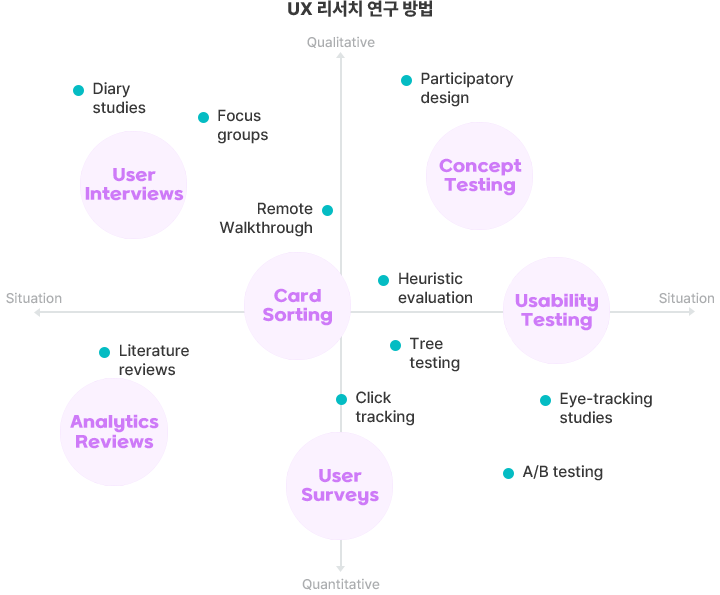
<style>
.page{position:relative;width:720px;height:595px;background:#ffffff}
.page>*{position:absolute;margin:0}
.t1{font:18px "Pretendard-ExtraBold";color:#393939;text-transform:uppercase}
.t2{font:14px "Pretendard-Medium";color:#abadaf}
.t3{font:16px "Pretendard-Medium";color:#373737}
.t4{font:16px "SBAggroB";letter-spacing:-0.025em;color:#ce7af8}
</style>
<div class="page">
<p class="t1" style="left:288px;top:0px;width:144px;height:17px">UX 리서치 연구 방법</p>
<p class="t2" style="left:307px;top:36px;width:68px;height:12px">Qualitative</p>
<p class="t3" style="left:421px;top:72px;width:93px;height:35px">Participatory <br>design</p>
<p class="t3" style="left:93px;top:82px;width:53px;height:32px">Diary <br>studies</p>
<p class="t3" style="left:218px;top:109px;width:50px;height:35px">Focus <br>groups</p>
<p class="t4" style="left:439px;top:158px;width:83px;height:38px;text-align:center">Concept<br>Testing</p>
<p class="t4" style="left:85px;top:168px;width:99px;height:33px;text-align:center">User<br>Interviews</p>
<p class="t3" style="left:219px;top:202px;width:94px;height:35px;text-align:right">Remote<br>Walkthrough</p>
<p class="t3" style="left:398px;top:272px;width:74px;height:32px">Heuristic<br>evaluation</p>
<p class="t2" style="left:6px;top:292px;width:56px;height:12px">Situation</p>
<p class="t4" style="left:263px;top:288px;width:69px;height:38px;text-align:center">Card<br>Sorting</p>
<p class="t4" style="left:515px;top:293px;width:83px;height:38px;text-align:center">Usability<br>Testing</p>
<p class="t2" style="left:659px;top:292px;width:55px;height:12px">Situation</p>
<p class="t3" style="left:409px;top:337px;width:51px;height:35px">Tree<br>testing</p>
<p class="t3" style="left:119px;top:344px;width:70px;height:32px">Literature<br>reviews</p>
<p class="t3" style="left:355px;top:391px;width:59px;height:35px">Click<br>tracking</p>
<p class="t3" style="left:560px;top:392px;width:92px;height:32px">Eye-tracking<br>studies</p>
<p class="t4" style="left:70px;top:414px;width:89px;height:35px;text-align:center">Analytics<br>Reviews</p>
<p class="t4" style="left:301px;top:469px;width:78px;height:37px;text-align:center">User<br>Surveys</p>
<p class="t3" style="left:522px;top:465px;width:81px;height:16px">A/B testing</p>
<p class="t2" style="left:302px;top:578px;width:78px;height:12px">Quantitative</p>
</div>
